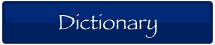
<style>
.page{position:relative;width:215px;height:45px;background:#002160}
.page>*{position:absolute;margin:0}
.t1{font:21.3px "Papyrus";color:#ffffff}
</style>
<div class="page">
<p class="t1" style="left:58px;top:14px;width:99px;height:24px">Dictionary</p>
</div>
